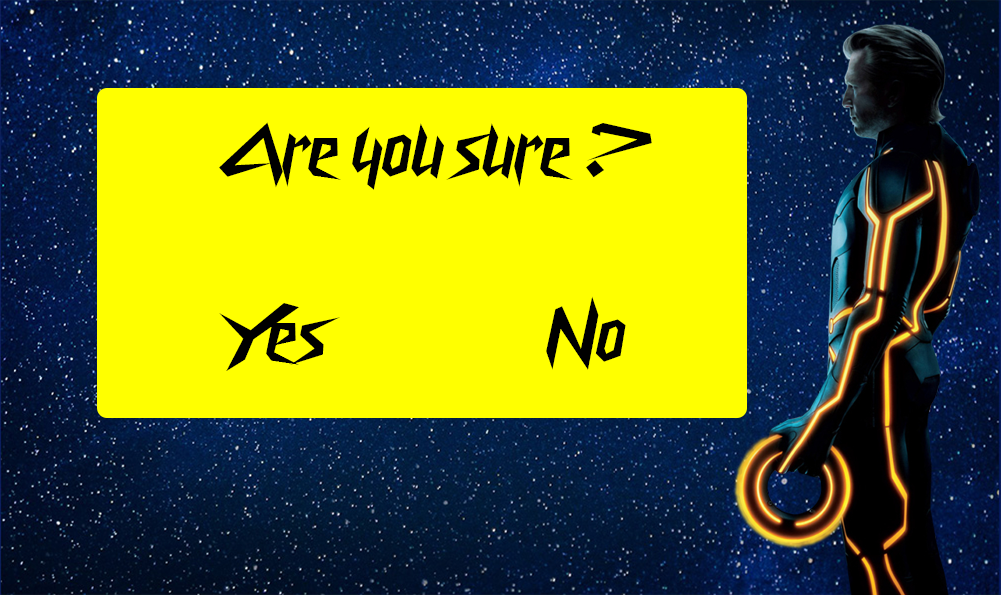
<style>
.page{position:relative;width:1001px;height:595px;background:#ffff00}
.page>*{position:absolute;margin:0}
.t1{font:75px "CyberwayRiders";color:#000000}
</style>
<div class="page">
<p class="t1" style="left:219px;top:122px;width:433px;height:68px">Are you sure ?</p>
<p class="t1" style="left:219px;top:303px;width:121px;height:68px">Yes</p>
<p class="t1" style="left:546px;top:296px;width:80px;height:74px">No</p>
</div>
